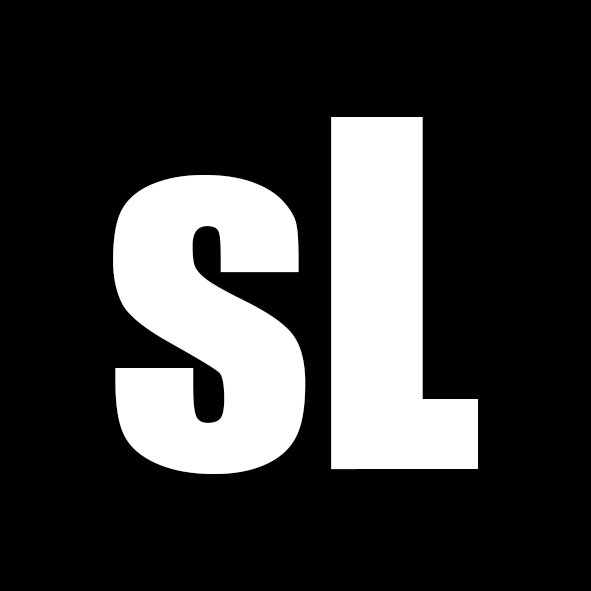
<style>
.page{position:relative;width:591px;height:591px;background:#000000}
.page>*{position:absolute;margin:0}
.t1{font:445.1px "Impact";color:#ffffff}
</style>
<div class="page">
<p class="t1" style="left:113px;top:117px;width:365px;height:357px">sL</p>
</div>
